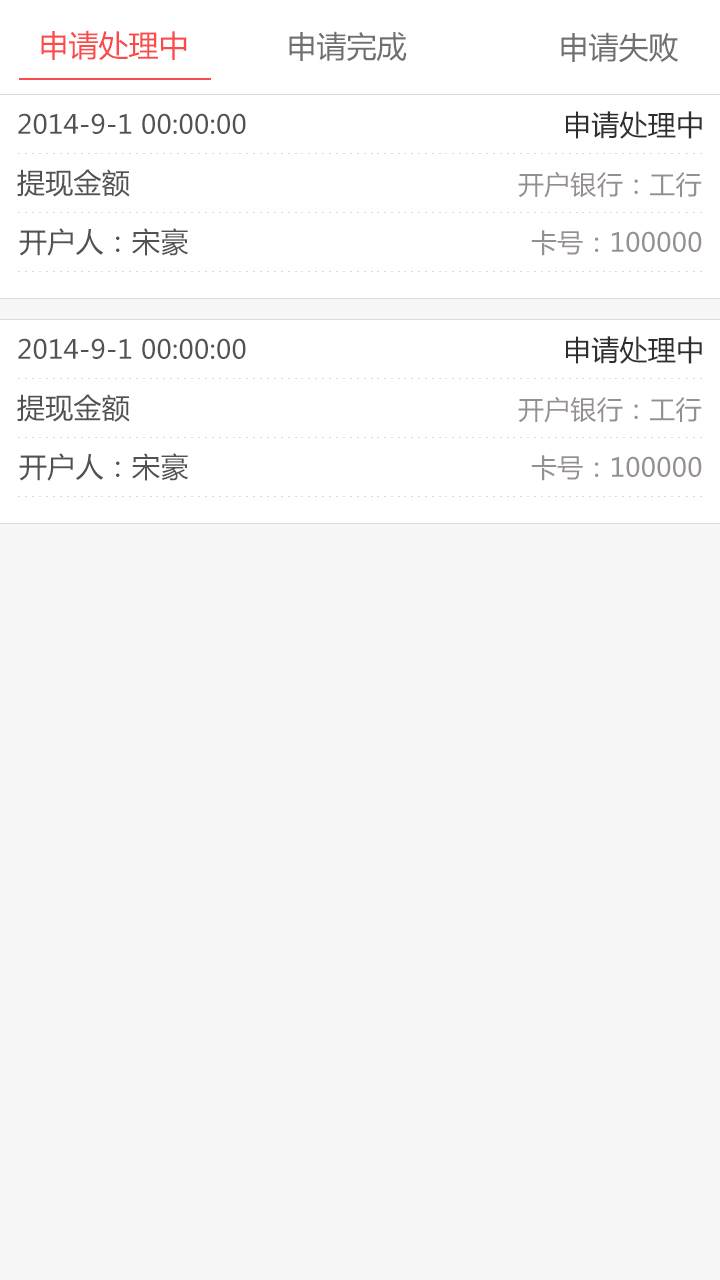
<style>
.page{position:relative;width:720px;height:1280px;background:#f7f7f7}
.page>*{position:absolute;margin:0}
.t1{font:30px "MicrosoftYaHei";color:#fc4a4a}
.t2{font:30px "MicrosoftYaHei";color:#707070}
.t3{font:26px "MicrosoftYaHei";letter-spacing:0.01em;color:#525252}
.t4{font:28px "MicrosoftYaHei";letter-spacing:0.01em;color:#2f2f2f}
.t5{font:28px "MicrosoftYaHei";letter-spacing:0.01em;color:#525252}
.t6{font:26px "MicrosoftYaHei";letter-spacing:0.01em;color:#958f93}
</style>
<div class="page">
<p class="t1" style="left:41px;top:30px;width:146px;height:31px">申请处理中</p>
<p class="t2" style="left:289px;top:31px;width:118px;height:30px">申请完成</p>
<p class="t2" style="left:561px;top:32px;width:118px;height:31px">申请失败</p>
<p class="t3" style="left:18px;top:113px;width:228px;height:21px">2014-9-1 00:00:00</p>
<p class="t4" style="left:566px;top:111px;width:136px;height:28px">申请处理中</p>
<p class="t5" style="left:17px;top:169px;width:113px;height:28px">提现金额</p>
<p class="t6" style="left:518px;top:171px;width:184px;height:27px">开户银行：工行</p>
<p class="t5" style="left:19px;top:228px;width:169px;height:28px">开户人：宋豪</p>
<p class="t6" style="left:531px;top:230px;width:171px;height:26px">卡号：100000</p>
<p class="t3" style="left:18px;top:338px;width:228px;height:21px">2014-9-1 00:00:00</p>
<p class="t4" style="left:566px;top:336px;width:136px;height:28px">申请处理中</p>
<p class="t5" style="left:17px;top:394px;width:113px;height:28px">提现金额</p>
<p class="t6" style="left:518px;top:396px;width:184px;height:27px">开户银行：工行</p>
<p class="t5" style="left:19px;top:453px;width:169px;height:28px">开户人：宋豪</p>
<p class="t6" style="left:531px;top:455px;width:171px;height:26px">卡号：100000</p>
</div>
